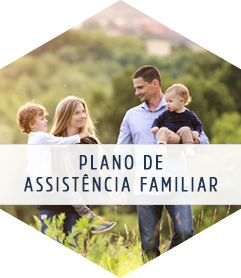
<style>
.page{position:relative;width:241px;height:278px;background:#ffffff}
.page>*{position:absolute;margin:0}
.t1{font:20px/22px "AmsiProCond-Light";letter-spacing:0.12em;color:#1d354f;text-transform:uppercase;font-weight:bold}
</style>
<div class="page">
<p class="t1" style="left:24px;top:155px;width:194px;height:37px;text-align:center">Plano dE<br>Assistência familiar</p>
</div>
